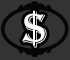
<style>
.page{position:relative;width:70px;height:60px;background:#333333}
.page>*{position:absolute;margin:0}
.t1{font:43.3px "Algerian";color:#fdfafa}
</style>
<div class="page">
<p class="t1" style="left:22px;top:10px;width:25px;height:38px">$</p>
</div>
